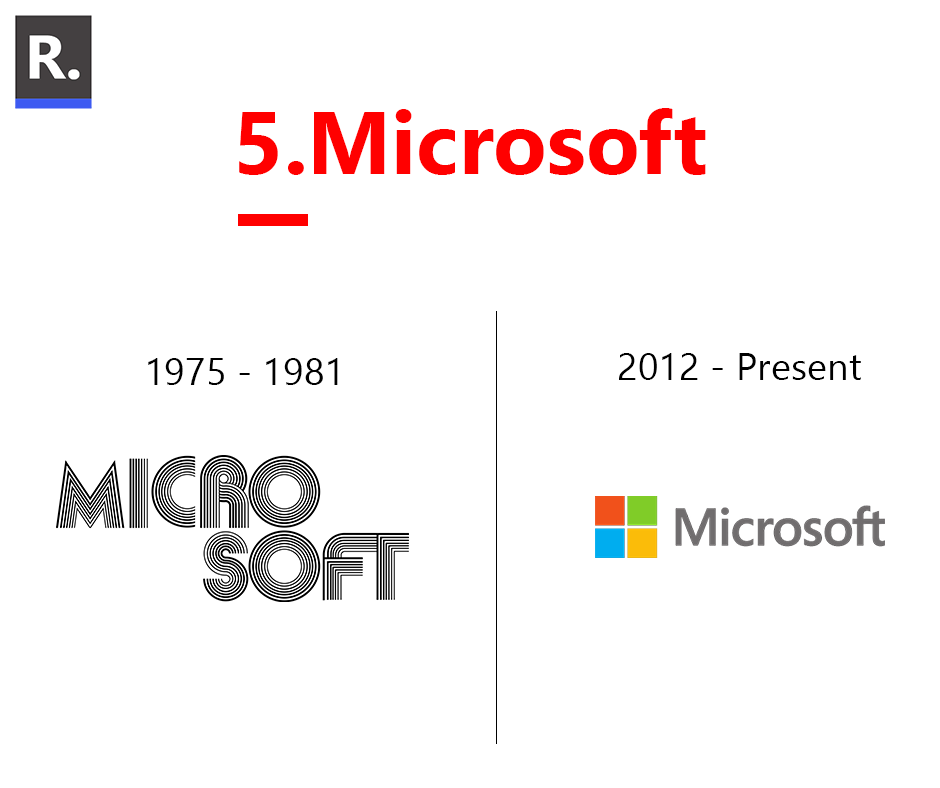
<style>
.page{position:relative;width:940px;height:788px;background:#ffffff}
.page>*{position:absolute;margin:0}
.t1{font:87.8px "SegoeUI-Bold";color:#ff0000}
.t2{font:38.3px "SegoeUI";color:#000000}
</style>
<div class="page">
<p class="t1" style="left:239px;top:108px;width:467px;height:67px">5.Microsoft</p>
<p class="t2" style="left:619px;top:353px;width:242px;height:27px">2012 - Present</p>
<p class="t2" style="left:148px;top:358px;width:190px;height:27px">1975 - 1981</p>
</div>
